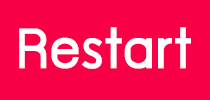
<style>
.page{position:relative;width:210px;height:100px;background:#f80046}
.page>*{position:absolute;margin:0}
.t1{font:65px "supermarket";color:#ffffff;font-weight:bold}
</style>
<div class="page">
<p class="t1" style="left:19px;top:27px;width:172px;height:42px">Restart</p>
</div>
